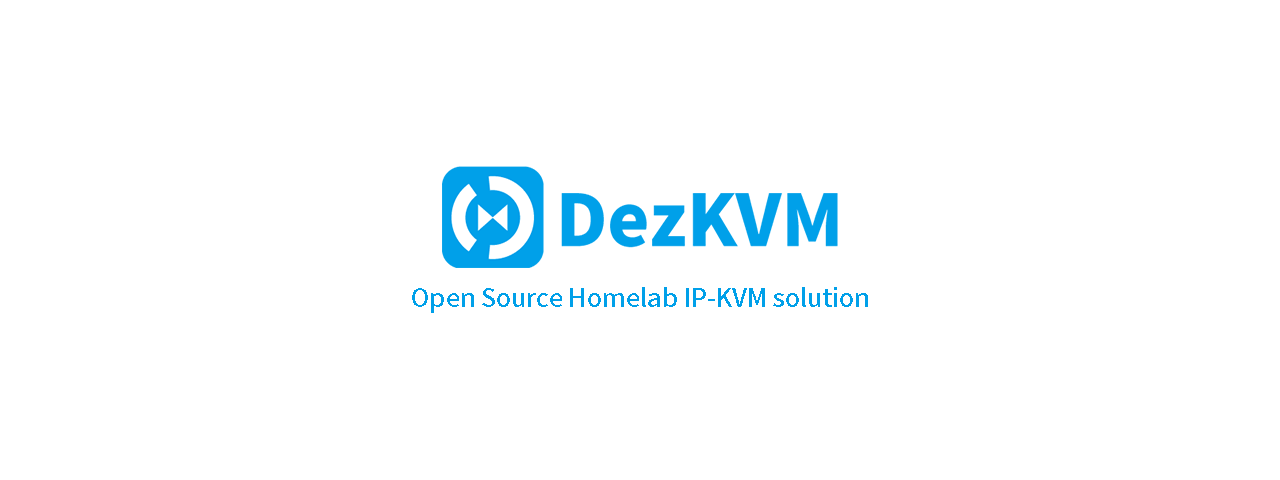
<style>
.page{position:relative;width:1280px;height:480px;background:#ffffff}
.page>*{position:absolute;margin:0}
.t1{font:25px "NotoSansCJKhk-Medium";color:#00a0e9}
</style>
<div class="page">
<p class="t1" style="left:412px;top:287px;width:456px;height:26px">Open Source Homelab IP-KVM solution</p>
</div>
